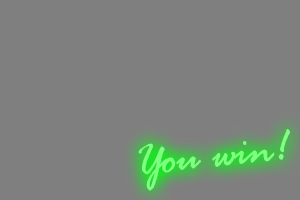
<style>
.page{position:relative;width:300px;height:200px;background:#7f7f7f}
.page>*{position:absolute;margin:0}
.t1{font:48px "RageItalicLetPlain";color:#7dff80}
</style>
<div class="page">
<p class="t1" style="left:138px;top:129px;width:152px;height:62px;rotate:-6deg">You win!</p>
</div>
